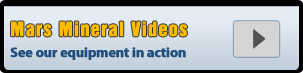
<style>
.page{position:relative;width:303px;height:73px}
.page>*{position:absolute;margin:0}
.t1{font:18px "HelveticaInseratLTStd-Roman";letter-spacing:0.05em;color:#ffbb00;font-weight:bold}
.t2{font:14px "MyriadPro-Bold";letter-spacing:-0.025em;color:#22507e;font-weight:bold}
</style>
<div class="page">
<p class="t1" style="left:11px;top:21px;width:176px;height:16px">Mars Mineral Videos</p>
<p class="t2" style="left:10px;top:47px;width:176px;height:13px">See our equipment in action</p>
</div>
